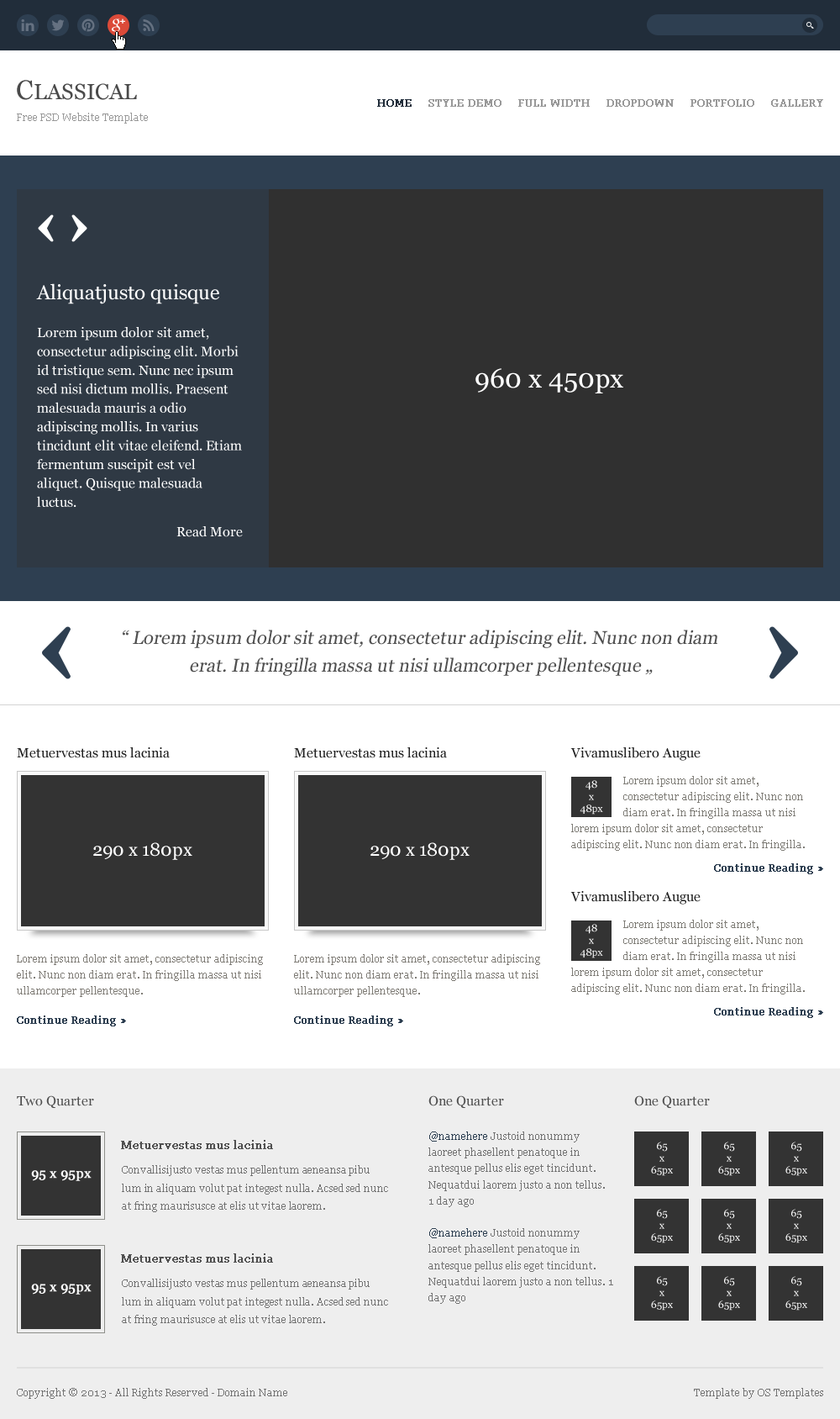
<style>
.page{position:relative;width:840px;height:1419px;background:#ffffff}
.page>*{position:absolute;margin:0}
.t1{font:21.9px "Georgia";color:#4a4a4a}
.t2{font:26.9px "Georgia";color:#4a4a4a}
.t3{font:10.1px "Georgia";color:#212d3a;font-weight:bold}
.t4{font:10.1px "Georgia";color:#999999;font-weight:bold}
.t5{font:10.1px "Georgia";color:#999999}
.t6{font:20.2px "Georgia";color:#ffffff}
.t7{font:13.4px/18.8px "Georgia";color:#ffffff}
.t8{font:26.9px "Georgia";color:#ffffff}
.t9{font:13.4px "Georgia";color:#ffffff}
.t10{font:18.5px/27.7px "Georgia";color:#505050;font-style:italic}
.t11{font:18.5px/18.5px "Georgia";color:#505050;font-style:italic}
.t12{font:13.4px "Georgia";color:#1f1f1f}
.t13{font:10.1px/12.1px "Georgia";color:#ffffff}
.t14{font:10.1px/16.1px "Georgia";color:#7f7d77}
.t15{font:18.5px "Georgia";color:#ffffff}
.t16{font:10.1px "Georgia";color:#2e3f51;font-weight:bold}
.t17{font:10.1px/16.1px "Georgia";color:#807d77}
.t18{font:13.4px "Georgia";color:#505050}
.t19{font:10.1px/16.1px "Georgia";color:#727272}
.t20{font:10.1px/16.1px "Georgia";color:#2d3f51}
.t21{font:11.8px "Georgia";color:#505050;font-weight:bold}
.t22{font:13.4px "Georgia";color:#ffffff;font-weight:bold}
.t23{font:10.1px/18.2px "Georgia";letter-spacing:-0.01em;color:#737373}
.t24{font:10.1px "Georgia";color:#737373}
</style>
<div class="page">
<p class="t1" style="left:17px;top:80px;width:120px;height:20px"><span class="t2">C</span>LASSICAL</p>
<p class="t3" style="left:377px;top:99px;width:35px;height:8px">HOME</p>
<p class="t4" style="left:429px;top:99px;width:73px;height:8px">STYLE DEMO</p>
<p class="t4" style="left:519px;top:99px;width:71px;height:8px">FULL WIDTH</p>
<p class="t4" style="left:607px;top:99px;width:67px;height:8px">DROPDOWN</p>
<p class="t4" style="left:691px;top:99px;width:64px;height:8px">PORTFOLIO</p>
<p class="t4" style="left:772px;top:99px;width:52px;height:8px">GALLERY</p>
<p class="t5" style="left:17px;top:113px;width:131px;height:11px">Free PSD Website Template</p>
<p class="t6" style="left:36px;top:283px;width:183px;height:21px">Aliquatjusto quisque</p>
<p class="t7" style="left:37px;top:327px;width:205px;height:180px">Lorem ipsum dolor sit amet, consectetur adipiscing elit. Morbi id tristique sem. Nunc nec ipsum sed nisi dictum mollis. Praesent malesuada mauris a odio adipiscing mollis. In varius tincidunt elit vitae eleifend. Etiam fermentum suscipit est vel aliquet. Quisque malesuada luctus.</p>
<p class="t8" style="left:476px;top:368px;width:148px;height:25px">960 x 450px</p>
<p class="t9" style="left:177px;top:526px;width:66px;height:11px">Read More</p>
<p class="t10" style="left:123px;top:630px;width:595px;height:46px;text-align:center"><span class="t11">“</span> Lorem ipsum dolor sit amet, consectetur adipiscing elit. Nunc non diam <br>erat. In fringilla massa ut nisi ullamcorper pellentesque „</p>
<p class="t12" style="left:17px;top:747px;width:153px;height:11px">Metuervestas mus lacinia</p>
<p class="t12" style="left:294px;top:747px;width:153px;height:11px">Metuervestas mus lacinia</p>
<p class="t12" style="left:571px;top:747px;width:130px;height:14px">Vivamuslibero Augue</p>
<p class="t13" style="left:580px;top:780px;width:23px;height:34px;text-align:center">48<br>x<br>48px</p>
<p class="t14" style="left:624px;top:776px;width:180px;height:43px">Lorem ipsum dolor sit amet, consectetur adipiscing elit. Nunc non diam erat. In fringilla massa ut nisi</p>
<p class="t14" style="left:572px;top:824px;width:233px;height:27px">lorem ipsum dolor sit amet, consectetur adipiscing elit. Nunc non diam erat. In fringilla.</p>
<p class="t15" style="left:93px;top:842px;width:99px;height:18px">290 x 180px</p>
<p class="t15" style="left:371px;top:842px;width:99px;height:18px">290 x 180px</p>
<p class="t16" style="left:714px;top:863px;width:110px;height:11px">Continue Reading »</p>
<p class="t12" style="left:571px;top:891px;width:130px;height:13px">Vivamuslibero Augue</p>
<p class="t13" style="left:580px;top:924px;width:23px;height:34px;text-align:center">48<br>x<br>48px</p>
<p class="t14" style="left:624px;top:919px;width:180px;height:43px">Lorem ipsum dolor sit amet, consectetur adipiscing elit. Nunc non diam erat. In fringilla massa ut nisi</p>
<p class="t17" style="left:17px;top:954px;width:246px;height:43px">Lorem ipsum dolor sit amet, consectetur adipiscing elit. Nunc non diam erat. In fringilla massa ut nisi ullamcorper pellentesque.</p>
<p class="t17" style="left:294px;top:954px;width:246px;height:43px">Lorem ipsum dolor sit amet, consectetur adipiscing elit. Nunc non diam erat. In fringilla massa ut nisi ullamcorper pellentesque.</p>
<p class="t14" style="left:572px;top:967px;width:233px;height:27px">lorem ipsum dolor sit amet, consectetur adipiscing elit. Nunc non diam erat. In fringilla.</p>
<p class="t16" style="left:714px;top:1007px;width:110px;height:11px">Continue Reading »</p>
<p class="t16" style="left:17px;top:1015px;width:109px;height:11px">Continue Reading »</p>
<p class="t16" style="left:294px;top:1015px;width:109px;height:11px">Continue Reading »</p>
<p class="t18" style="left:17px;top:1095px;width:77px;height:13px">Two Quarter</p>
<p class="t18" style="left:429px;top:1095px;width:75px;height:13px">One Quarter</p>
<p class="t18" style="left:635px;top:1095px;width:75px;height:13px">One Quarter</p>
<p class="t19" style="left:429px;top:1131px;width:185px;height:173px"><span class="t20">@namehere</span> Justoid nonummy laoreet phasellent penatoque in antesque pellus elis eget tincidunt. Nequatdui laorem justo a non tellus.  1 day ago<br><br><span class="t20">@namehere</span> Justoid nonummy laoreet phasellent penatoque in antesque pellus elis eget tincidunt. Nequatdui laorem justo a non tellus. 1 day ago</p>
<p class="t21" style="left:121px;top:1140px;width:152px;height:9px">Metuervestas mus lacinia</p>
<p class="t13" style="left:651px;top:1141px;width:22px;height:35px;text-align:center">65<br>x<br>65px</p>
<p class="t13" style="left:719px;top:1141px;width:21px;height:35px;text-align:center">65<br>x<br>65px</p>
<p class="t13" style="left:786px;top:1141px;width:22px;height:35px;text-align:center">65<br>x<br>65px</p>
<p class="t22" style="left:31px;top:1170px;width:61px;height:11px">95 x 95px</p>
<p class="t23" style="left:122px;top:1165px;width:266px;height:47px">Convallisijusto vestas mus pellentum aeneansa pibu lum in aliquam volut pat integest nulla. Acsed sed nunc at fring maurisusce at elis ut vitae laorem.</p>
<p class="t13" style="left:651px;top:1209px;width:22px;height:34px;text-align:center">65<br>x<br>65px</p>
<p class="t13" style="left:719px;top:1209px;width:21px;height:34px;text-align:center">65<br>x<br>65px</p>
<p class="t13" style="left:786px;top:1209px;width:22px;height:34px;text-align:center">65<br>x<br>65px</p>
<p class="t21" style="left:121px;top:1253px;width:152px;height:9px">Metuervestas mus lacinia</p>
<p class="t13" style="left:651px;top:1276px;width:22px;height:34px;text-align:center">65<br>x<br>65px</p>
<p class="t13" style="left:719px;top:1276px;width:21px;height:34px;text-align:center">65<br>x<br>65px</p>
<p class="t13" style="left:786px;top:1276px;width:22px;height:34px;text-align:center">65<br>x<br>65px</p>
<p class="t22" style="left:31px;top:1283px;width:61px;height:11px">95 x 95px</p>
<p class="t23" style="left:122px;top:1278px;width:266px;height:47px">Convallisijusto vestas mus pellentum aeneansa pibu lum in aliquam volut pat integest nulla. Acsed sed nunc at fring maurisusce at elis ut vitae laorem.</p>
<p class="t24" style="left:17px;top:1388px;width:270px;height:11px">Copyright © 2013 - All Rights Reserved - Domain Name</p>
<p class="t24" style="left:694px;top:1388px;width:130px;height:11px">Template by OS Templates</p>
</div>
